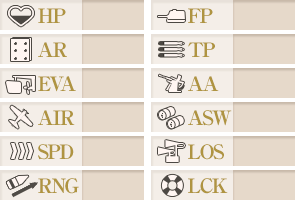
<style>
.page{position:relative;width:297px;height:205px;background:#e6d9ca}
.page>*{position:absolute;margin:0}
.t1{font:20px/34px "RyuminPro-ExBold";letter-spacing:-0.08em;color:#af9441}
</style>
<div class="page">
<p class="t1" style="left:38px;top:8px;width:41px;height:186px">HP<br>AR<br>EVA<br>AIR<br>SPD<br>RNG</p>
<p class="t1" style="left:188px;top:8px;width:44px;height:186px">FP<br>TP<br>AA<br>ASW<br>LOS<br>LCK</p>
</div>
